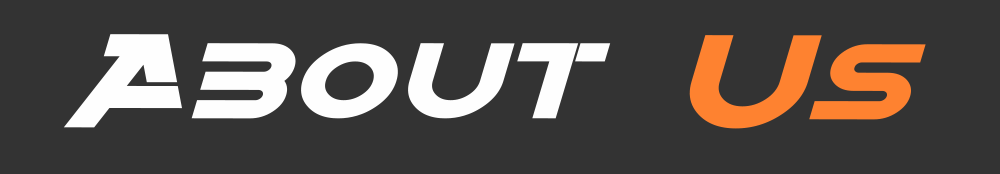
<style>
.page{position:relative;width:1000px;height:174px;background:#333333}
.page>*{position:absolute;margin:0}
.t1{font:132.7px "Alternity-BoldItalic";color:#fefefe;scale:1.24 1}
.t2{font:132.7px "Alternity-BoldItalic";color:#fe8230;scale:1.24 1}
</style>
<div class="page">
<p class="t1" style="left:63px;top:34px;width:863px;height:95px">About<span class="t2"> Us</span></p>
</div>
